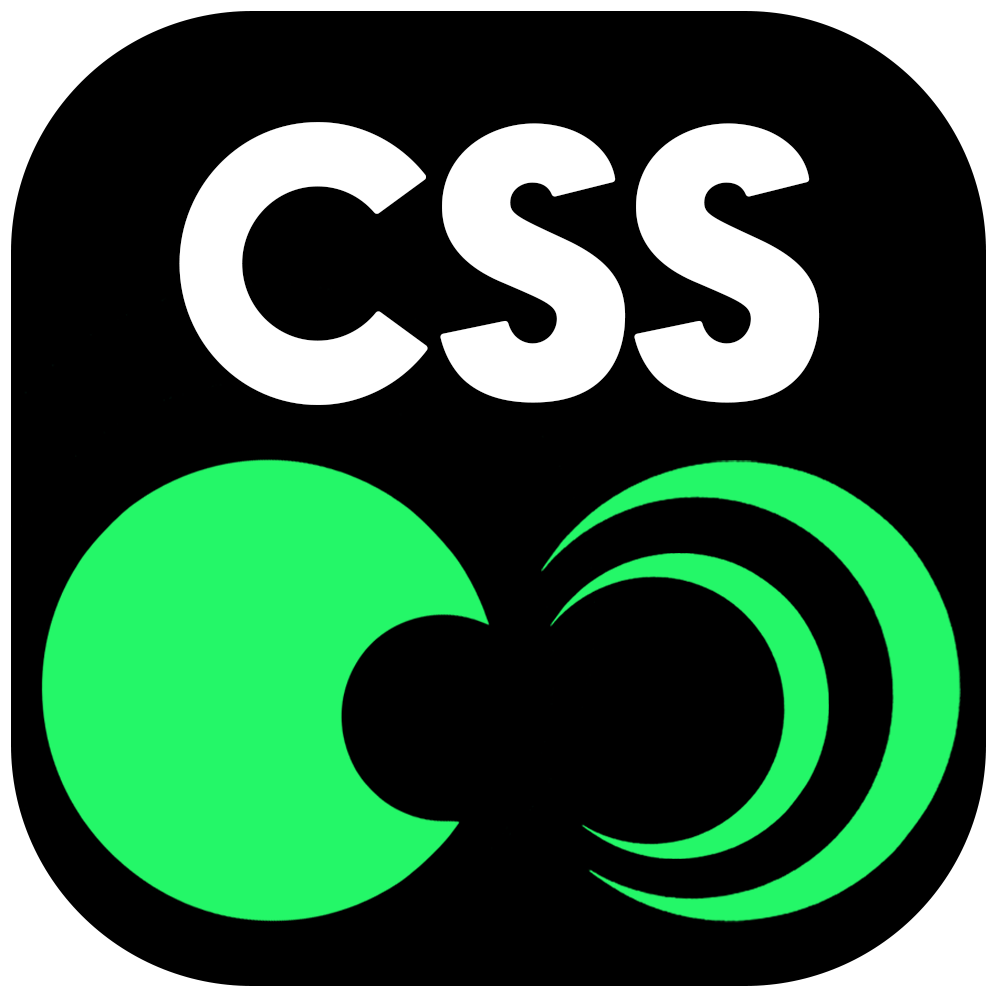
<style>
.page{position:relative;width:1000px;height:1000px;background:#000000}
.page>*{position:absolute;margin:0}
.t1{font:385px "NewakeDemo";color:#ffffff}
</style>
<div class="page">
<p class="t1" style="left:179px;top:122px;width:641px;height:283px">CSS</p>
</div>
